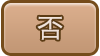
<style>
.page{position:relative;width:100px;height:56px}
.page>*{position:absolute;margin:0}
.t1{font:27px "STHeitiSC-Light";color:#efe2da}
</style>
<div class="page">
<p class="t1" style="left:37px;top:16px;width:26px;height:24px">否</p>
</div>
